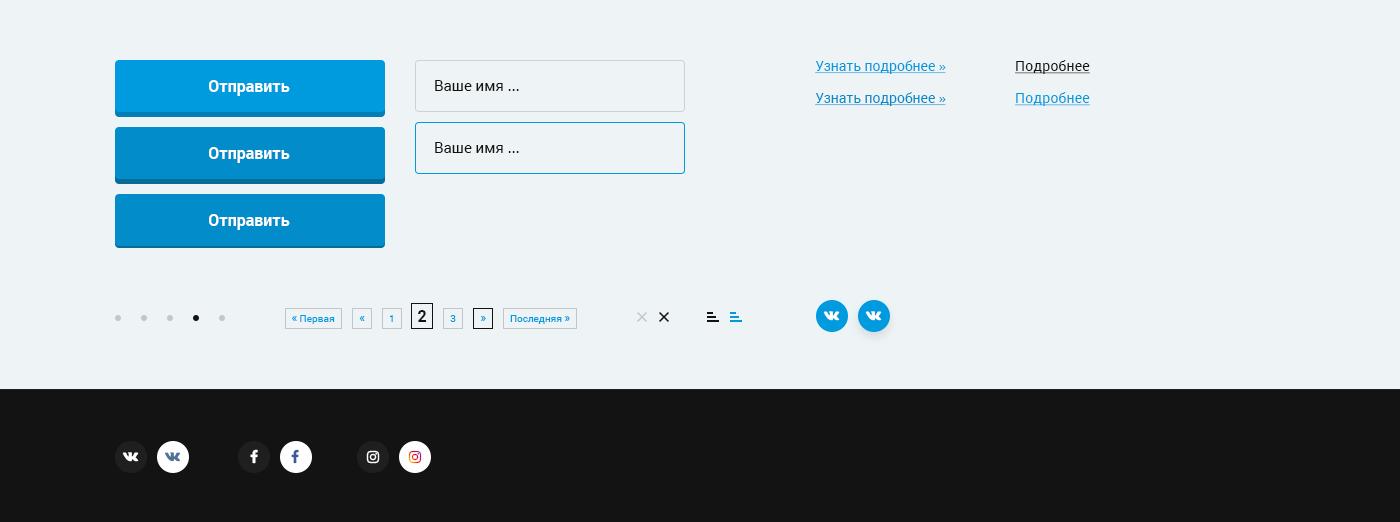
<style>
.page{position:relative;width:1400px;height:522px;background:#eef3f5}
.page>*{position:absolute;margin:0}
.t1{font:14px "Roboto-Regular";color:#009adf;text-decoration:underline}
.t2{font:14px "Roboto-Regular";color:#131313;text-decoration:underline}
.t3{font:16px "Roboto-Bold";color:#ffffff}
.t4{font:15px "Roboto-Regular";color:#131313}
.t5{font:14px "Roboto-Regular";color:#028cca;text-decoration:underline}
.t6{font:10px "Roboto-Regular";color:#009adf}
.t7{font:12px "Roboto-Regular";color:#009adf}
.t8{font:16px "Roboto-Bold";color:#131313}
.t9{font:12px "Roboto-Regular"}
.t10{font:10px "Roboto-Regular"}
</style>
<div class="page">
<p class="t1" style="left:815px;top:60px;width:131px;height:14px">Узнать подробнее »</p>
<p class="t2" style="left:1015px;top:60px;width:75px;height:14px">Подробнее</p>
<p class="t3" style="left:209px;top:80px;width:81px;height:16px">Отправить</p>
<p class="t4" style="left:435px;top:80px;width:84px;height:11px">Ваше имя ...</p>
<p class="t5" style="left:815px;top:92px;width:131px;height:14px">Узнать подробнее »</p>
<p class="t1" style="left:1015px;top:92px;width:75px;height:14px">Подробнее</p>
<p class="t3" style="left:209px;top:147px;width:81px;height:16px">Отправить</p>
<p class="t4" style="left:435px;top:142px;width:84px;height:11px">Ваше имя ...</p>
<p class="t3" style="left:209px;top:214px;width:81px;height:16px">Отправить</p>
<p class="t6" style="left:292px;top:315px;width:43px;height:9px"><span class="t7">«</span> Первая</p>
<p class="t7" style="left:359px;top:316px;width:6px;height:5px">«</p>
<p class="t6" style="left:390px;top:315px;width:3px;height:7px">1</p>
<p class="t8" style="left:418px;top:310px;width:8px;height:12px">2</p>
<p class="t6" style="left:450px;top:315px;width:6px;height:7px">3</p>
<p class="t9" style="left:480px;top:316px;width:6px;height:5px"><span class="t10"> </span>»</p>
<p class="t6" style="left:510px;top:315px;width:60px;height:9px">Последняя <span class="t7">»</span></p>
</div>
